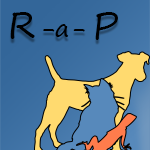
<style>
.page{position:relative;width:150px;height:150px}
.page>*{position:absolute;margin:0}
.t1{font:37.3px "SegoePrint";color:#000000}
.t2{font:25px "SegoePrint";color:#000000}
</style>
<div class="page">
<p class="t1" style="left:10px;top:12px;width:25px;height:27px">R</p>
<p class="t1" style="left:95px;top:12px;width:23px;height:28px">P</p>
<p class="t2" style="left:43px;top:24px;width:42px;height:13px">-a-</p>
</div>
